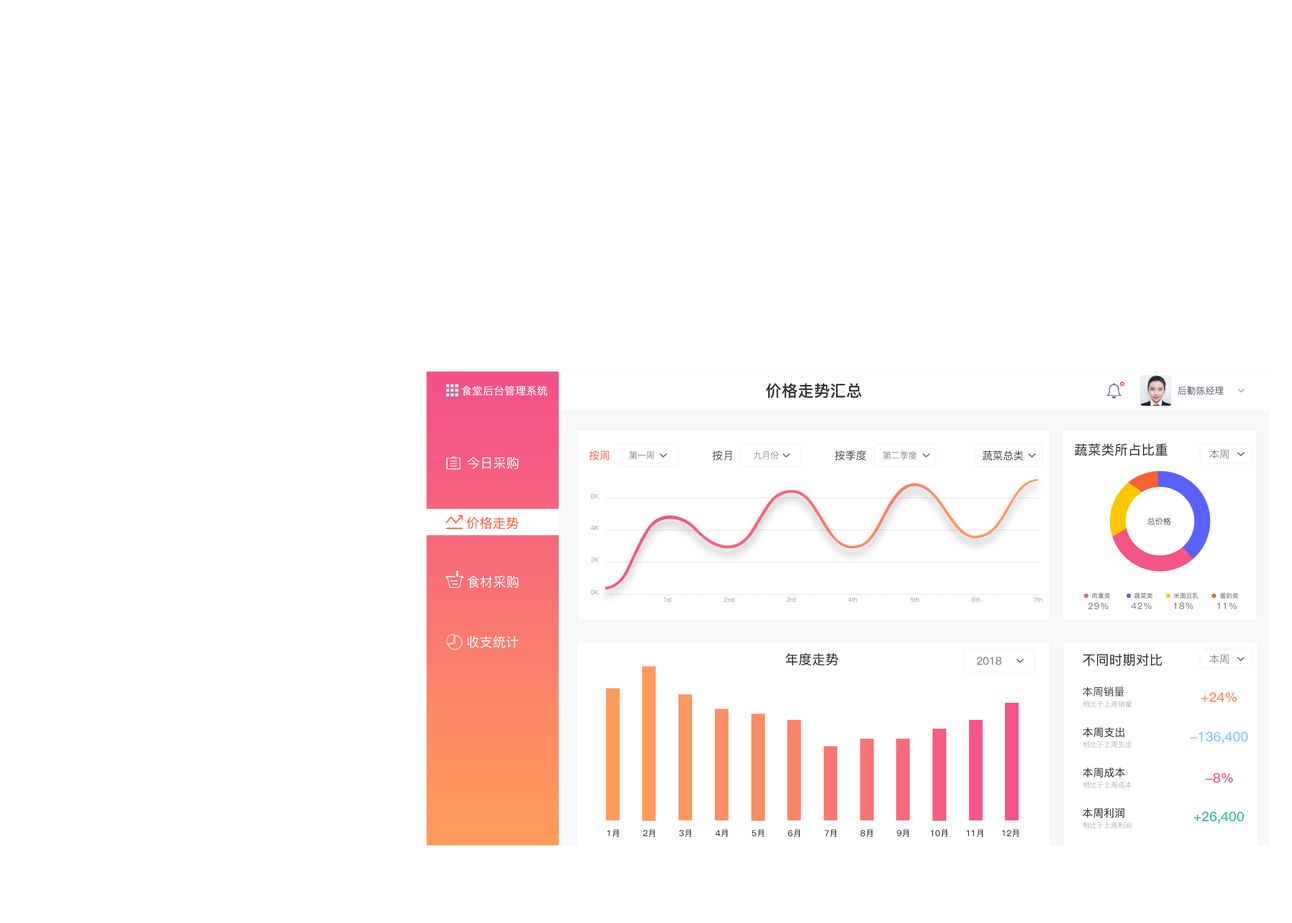
<style>
.page{position:relative;width:1292px;height:923px;background:#ffffff}
.page>*{position:absolute;margin:0}
.t1{font:10.5px "PingFang-SC-Regular";color:#ffffff;font-weight:bold}
.t2{font:15.8px "PingFang-SC-Bold";letter-spacing:0.02em;color:#333333}
.t3{font:9px "PingFang-SC-Light";color:#56606f;font-weight:bold}
.t4{font:13.2px "PingFang-SC-Medium";letter-spacing:0.02em;color:#333333}
.t5{font:10.5px "PingFang-SC-Regular";color:#666666}
.t6{font:13.2px "PingFang-SC-Medium";color:#ffffff}
.t7{font:10.5px "PingFang-SC-Regular";letter-spacing:0.02em;color:#ff4d30}
.t8{font:10.5px "PingFang-SC-Regular";letter-spacing:0.02em;color:#333333}
.t9{font:10.5px "PingFang-SC-Medium";color:#333333}
.t10{font:6.1px "PingFang-SC-Regular";color:#999999}
.t11{font:13.2px "PingFang-SC-Medium";color:#ff4d30}
.t12{font:7.9px "PingFang-SC-Regular";letter-spacing:0.02em;color:#212f3b;text-transform:uppercase}
.t13{font:8.8px "PingFang-SC-Medium";letter-spacing:0.1em;color:#666666}
.t14{font:7px "PingFang-SC-Regular";color:#999999}
.t15{font:13.2px "PingFang-SC-Bold";color:#fd8e63}
.t16{font:10.5px "PingFang-SC-Medium";letter-spacing:0.02em;color:#333333}
.t17{font:13.2px "PingFang-SC-Bold";color:#85c9fd}
.t18{font:13.2px "PingFang-SC-Bold";color:#f45486}
.t19{font:13.2px "PingFang-SC-Bold";color:#34bfa3}
.t20{font:8.3px "PingFang-SC-Medium";color:#000000}
</style>
<div class="page">
<p class="t1" style="left:461px;top:386px;width:86px;height:10px">食堂后台管理系统</p>
<p class="t2" style="left:766px;top:383px;width:95px;height:15px">价格走势汇总</p>
<p class="t3" style="left:1177px;top:386px;width:46px;height:9px">后勤陈经理</p>
<p class="t4" style="left:1075px;top:444px;width:92px;height:12px">蔬菜类所占比重</p>
<p class="t5" style="left:1209px;top:449px;width:20px;height:10px">本周</p>
<p class="t6" style="left:467px;top:457px;width:51px;height:12px">今日采购</p>
<p class="t7" style="left:589px;top:450px;width:20px;height:11px">按周</p>
<p class="t8" style="left:712px;top:450px;width:19px;height:11px">按月</p>
<p class="t8" style="left:835px;top:450px;width:31px;height:11px">按季度</p>
<p class="t9" style="left:982px;top:451px;width:41px;height:10px">蔬菜总类</p>
<p class="t10" style="left:591px;top:494px;width:7px;height:5px">6K</p>
<p class="t11" style="left:466px;top:517px;width:53px;height:12px">价格走势</p>
<p class="t12" style="left:1147px;top:518px;width:24px;height:7px">总价格</p>
<p class="t10" style="left:591px;top:526px;width:7px;height:4px">4K</p>
<p class="t10" style="left:591px;top:557px;width:7px;height:5px">2K</p>
<p class="t6" style="left:467px;top:576px;width:51px;height:12px">食材采购</p>
<p class="t10" style="left:591px;top:590px;width:7px;height:5px">0K</p>
<p class="t10" style="left:663px;top:598px;width:9px;height:4px">1st</p>
<p class="t10" style="left:724px;top:597px;width:10px;height:5px">2nd</p>
<p class="t10" style="left:786px;top:597px;width:9px;height:5px">3rd</p>
<p class="t10" style="left:848px;top:597px;width:9px;height:5px">4th</p>
<p class="t10" style="left:910px;top:597px;width:9px;height:5px">5th</p>
<p class="t10" style="left:971px;top:597px;width:9px;height:5px">6th</p>
<p class="t10" style="left:1033px;top:597px;width:9px;height:5px">7th</p>
<p class="t13" style="left:1088px;top:603px;width:20px;height:6px">29%</p>
<p class="t13" style="left:1131px;top:602px;width:20px;height:7px">42%</p>
<p class="t13" style="left:1174px;top:602px;width:19px;height:7px">18%</p>
<p class="t13" style="left:1217px;top:603px;width:19px;height:6px">11%</p>
<p class="t6" style="left:467px;top:636px;width:52px;height:12px">收支统计</p>
<p class="t4" style="left:785px;top:653px;width:53px;height:13px">年度走势</p>
<p class="t4" style="left:1082px;top:654px;width:80px;height:12px">不同时期对比</p>
<p class="t5" style="left:1209px;top:654px;width:20px;height:10px">本周</p>
<p class="t9" style="left:1082px;top:687px;width:42px;height:10px">本周销量</p>
<p class="t14" style="left:1083px;top:701px;width:49px;height:7px">相比于上周销量</p>
<p class="t15" style="left:1201px;top:692px;width:35px;height:10px">+24%</p>
<p class="t16" style="left:1082px;top:727px;width:42px;height:11px">本周支出</p>
<p class="t17" style="left:1190px;top:732px;width:58px;height:12px">-136,400</p>
<p class="t14" style="left:1083px;top:741px;width:48px;height:7px">相比于上周支出</p>
<p class="t16" style="left:1082px;top:767px;width:43px;height:10px">本周成本</p>
<p class="t18" style="left:1205px;top:773px;width:27px;height:10px">-8%</p>
<p class="t14" style="left:1083px;top:781px;width:49px;height:7px">相比于上周成本</p>
<p class="t16" style="left:1082px;top:808px;width:42px;height:10px">本周利润</p>
<p class="t14" style="left:1083px;top:822px;width:48px;height:7px">相比于上周利润</p>
<p class="t19" style="left:1194px;top:812px;width:50px;height:12px">+26,400</p>
<p class="t20" style="left:607px;top:830px;width:411px;height:7px">1月        2月        3月        4月        5月        6月        7月        8月        9月       10月      11月      12月</p>
</div>
